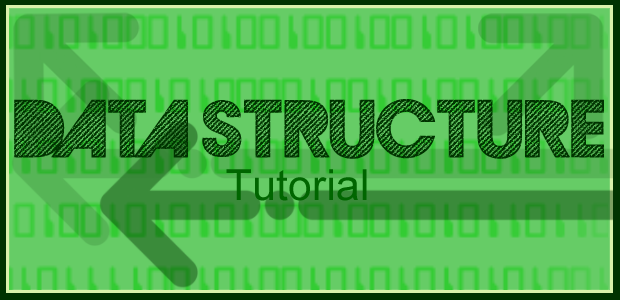
<style>
.page{position:relative;width:620px;height:300px;background:#66cc66}
.page>*{position:absolute;margin:0}
.t1{font:77.1px "GoodMorningAfternoonDEMO";color:#003300}
.t2{font:43.1px "ArialMT";color:#006600}
</style>
<div class="page">
<p class="t1" style="left:14px;top:99px;width:590px;height:60px">Data Structure</p>
<p class="t2" style="left:226px;top:169px;width:141px;height:32px">Tutorial</p>
</div>
